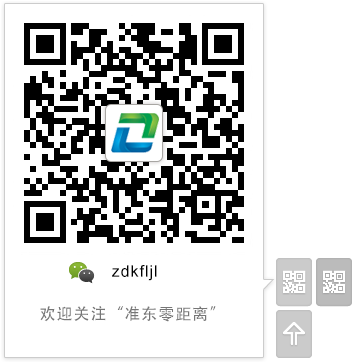
<style>
.page{position:relative;width:355px;height:364px;background:#ffffff}
.page>*{position:absolute;margin:0}
.t1{font:16px "ArialMT";letter-spacing:0.06em;color:#000000}
.t2{font:16px "AdobeHeitiStd-Regular";letter-spacing:0.06em;color:#767676}
</style>
<div class="page">
<p class="t1" style="left:112px;top:265px;width:45px;height:16px">zdkfljl</p>
<p class="t2" style="left:40px;top:306px;width:176px;height:16px">欢迎关注“准东零距离”</p>
</div>
